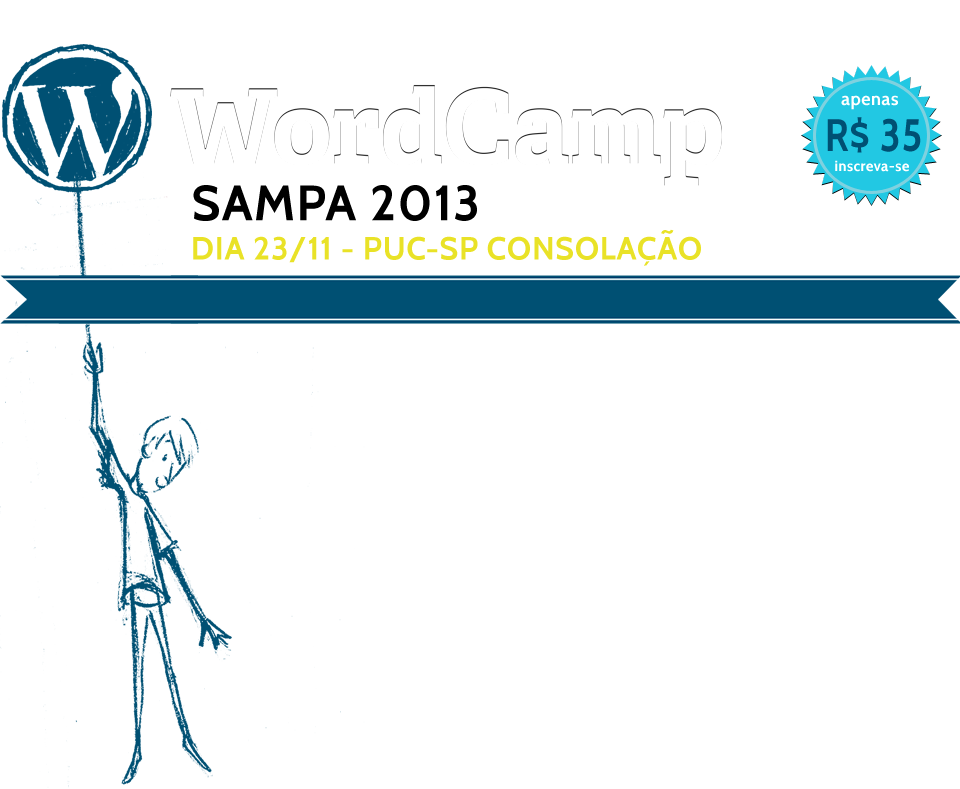
<style>
.page{position:relative;width:960px;height:789px;background:#ffffff}
.page>*{position:absolute;margin:0}
.t1{font:18px "Cabin-Bold";letter-spacing:0.025em;color:#ffffff}
.t2{font:45.2px "Cabin-Bold";letter-spacing:0.025em;color:#005073;scale:0.84 1}
.t3{font:14.7px "Cabin-Bold";letter-spacing:0.025em;color:#ffffff}
.t4{font:49.6px "Cabin-Bold";letter-spacing:0.025em;color:#000000}
.t5{font:32px "Cabin-Bold";letter-spacing:0.025em;color:#e9e227}
</style>
<div class="page">
<p class="t1" style="left:841px;top:95px;width:57px;height:15px">apenas</p>
<p class="t2" style="left:827px;top:117px;width:94px;height:36px">R$ 35</p>
<p class="t3" style="left:835px;top:160px;width:74px;height:12px">inscreva-se</p>
<p class="t4" style="left:193px;top:185px;width:284px;height:36px">SAMPA 2013</p>
<p class="t5" style="left:193px;top:229px;width:508px;height:37px">DIA 23/11 - PUC-SP CONSOLAÇÃO</p>
</div>
